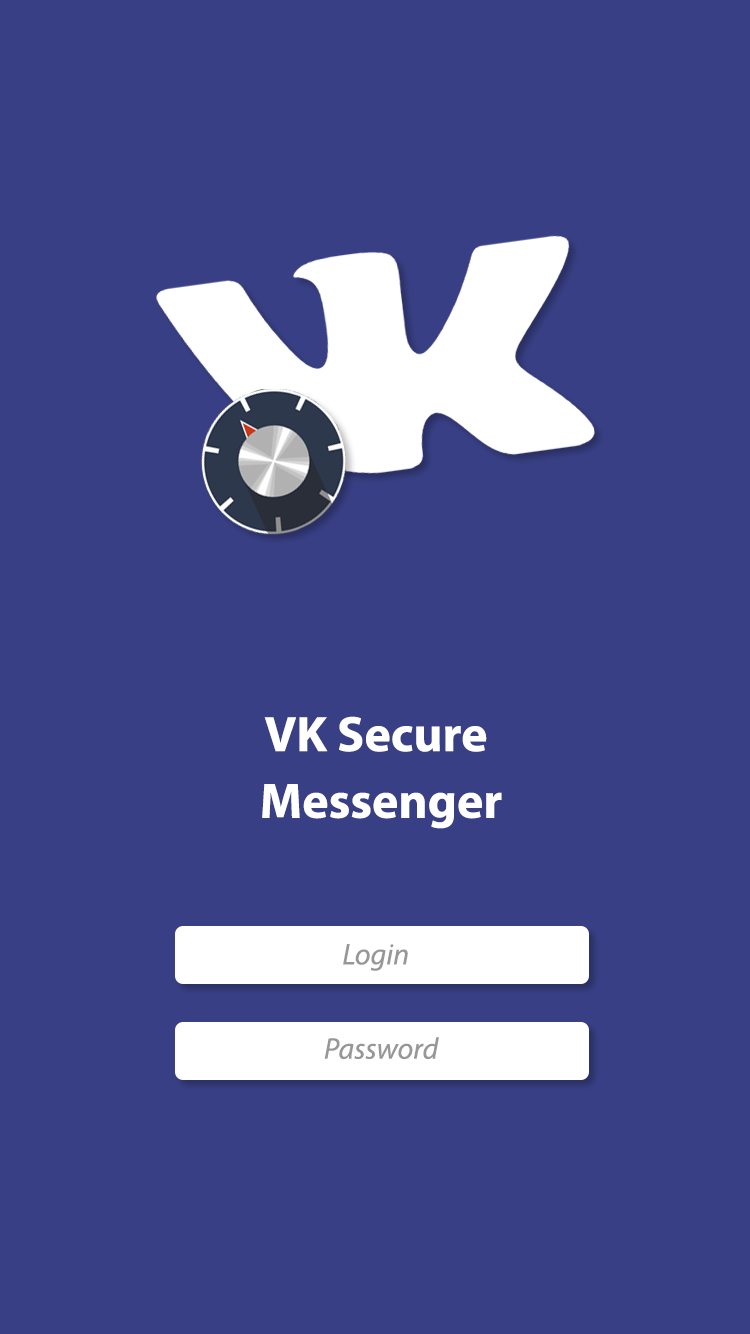
<style>
.page{position:relative;width:750px;height:1334px;background:#383f84}
.page>*{position:absolute;margin:0}
.t1{font:50px/66.7px "MyriadPro-Bold";color:#ffffff}
.t2{font:30px "MyriadPro-It";color:#979797}
</style>
<div class="page">
<p class="t1" style="left:262px;top:716px;width:240px;height:113px;text-align:center">VK Secure <br>Messenger</p>
<p class="t2" style="left:343px;top:944px;width:65px;height:27px">Login</p>
<p class="t2" style="left:324px;top:1037px;width:115px;height:23px">Password</p>
</div>
